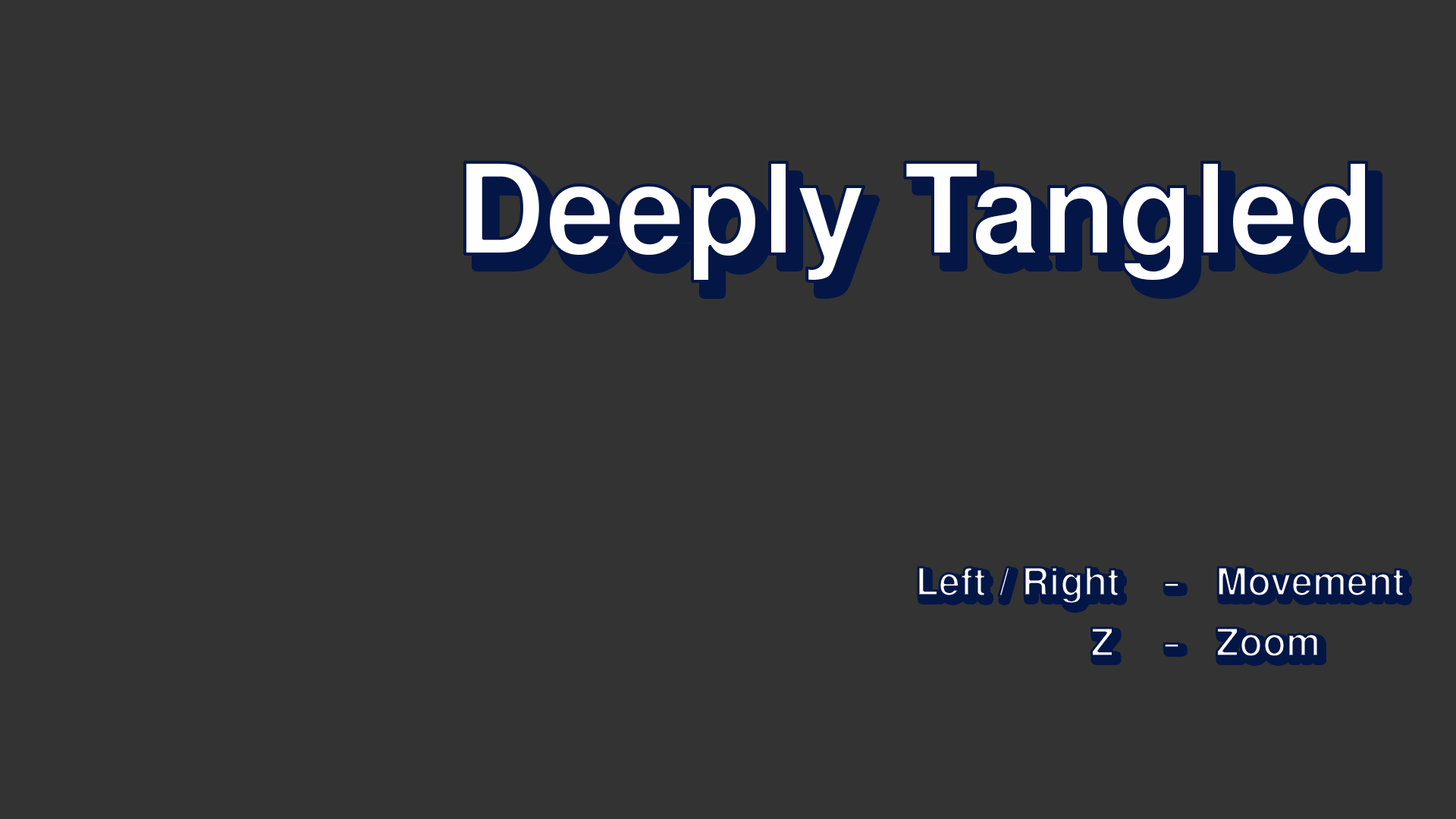
<style>
.page{position:relative;width:1456px;height:819px;background:#333333}
.page>*{position:absolute;margin:0}
.t1{font:136.9px "NachlieliCLM-Bold";color:#fffefe}
.t2{font:42.1px "NachlieliCLM-Bold"}
</style>
<div class="page">
<p class="t1" style="left:465px;top:162px;width:901px;height:120px">Deeply Tangled Within</p>
<p class="t2" style="left:918px;top:567px;width:486px;height:90px">Left / Right  -  Movement<br>       Z   -  Zoom</p>
</div>
